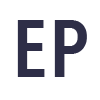
<style>
.page{position:relative;width:100px;height:100px;background:#ffffff}
.page>*{position:absolute;margin:0}
.t1{font:80.7px "AvenirNextCondensed-DemiBold";letter-spacing:0.015em;color:#2e2e47}
</style>
<div class="page">
<p class="t1" style="left:17px;top:20px;width:70px;height:57px">EP</p>
</div>
